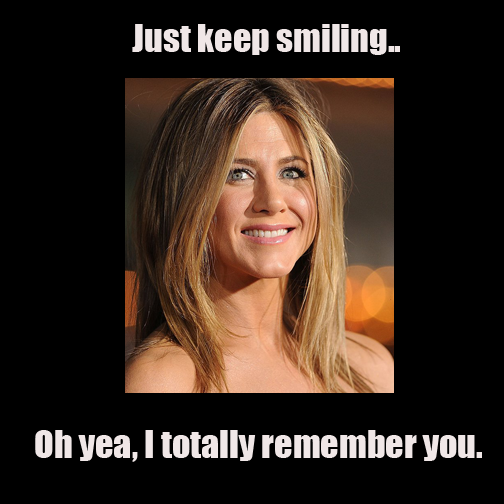
<style>
.page{position:relative;width:504px;height:504px;background:#000000}
.page>*{position:absolute;margin:0}
.t1{font:36px "Impact";color:#f0e7e7}
</style>
<div class="page">
<p class="t1" style="left:132px;top:24px;width:268px;height:31px">Just keep smiling..</p>
<p class="t1" style="left:35px;top:430px;width:447px;height:32px">Oh yea, I totally remember you.</p>
</div>
